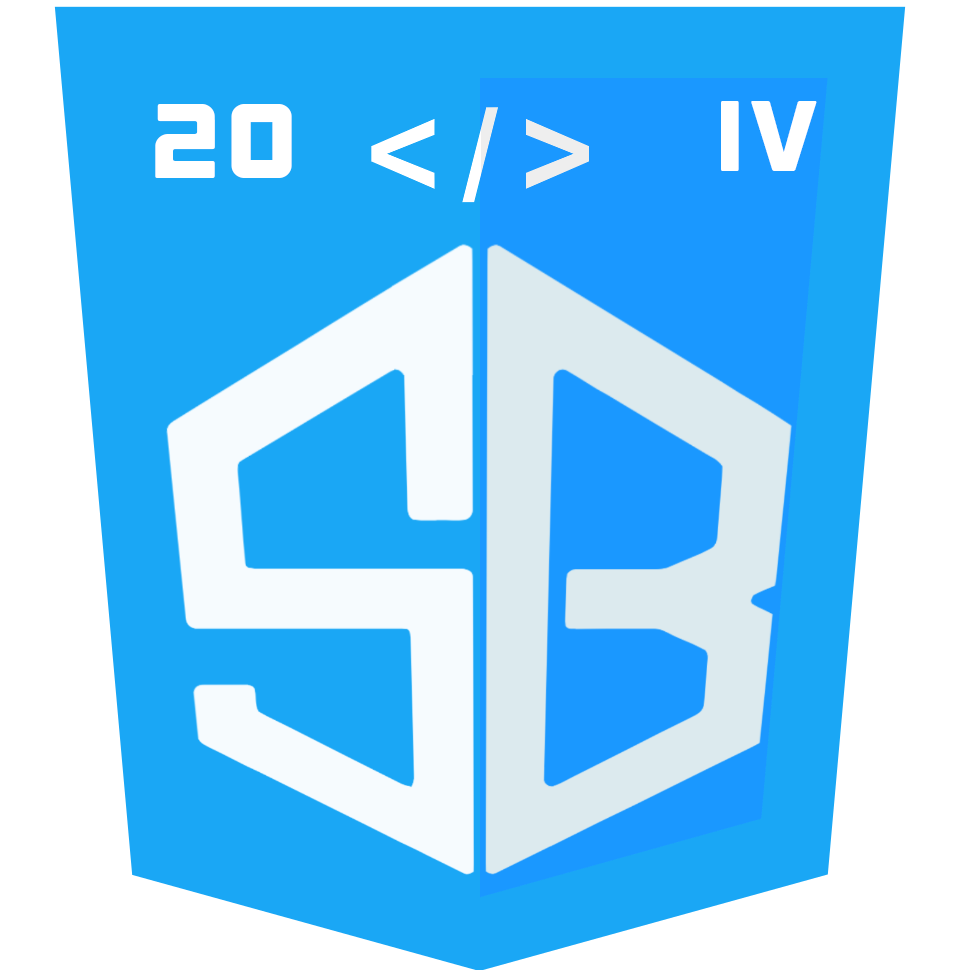
<style>
.page{position:relative;width:970px;height:970px;background:#1aa7f5}
.page>*{position:absolute;margin:0}
.t1{font:100px "Outage-Regular";color:#ffffff}
.t2{font:105.5px "Outage-Regular";color:#ffffff;scale:1.06 1}
</style>
<div class="page">
<p class="t1" style="left:721px;top:101px;width:96px;height:70px">Iv</p>
<p class="t2" style="left:155px;top:104px;width:137px;height:74px">20</p>
</div>
